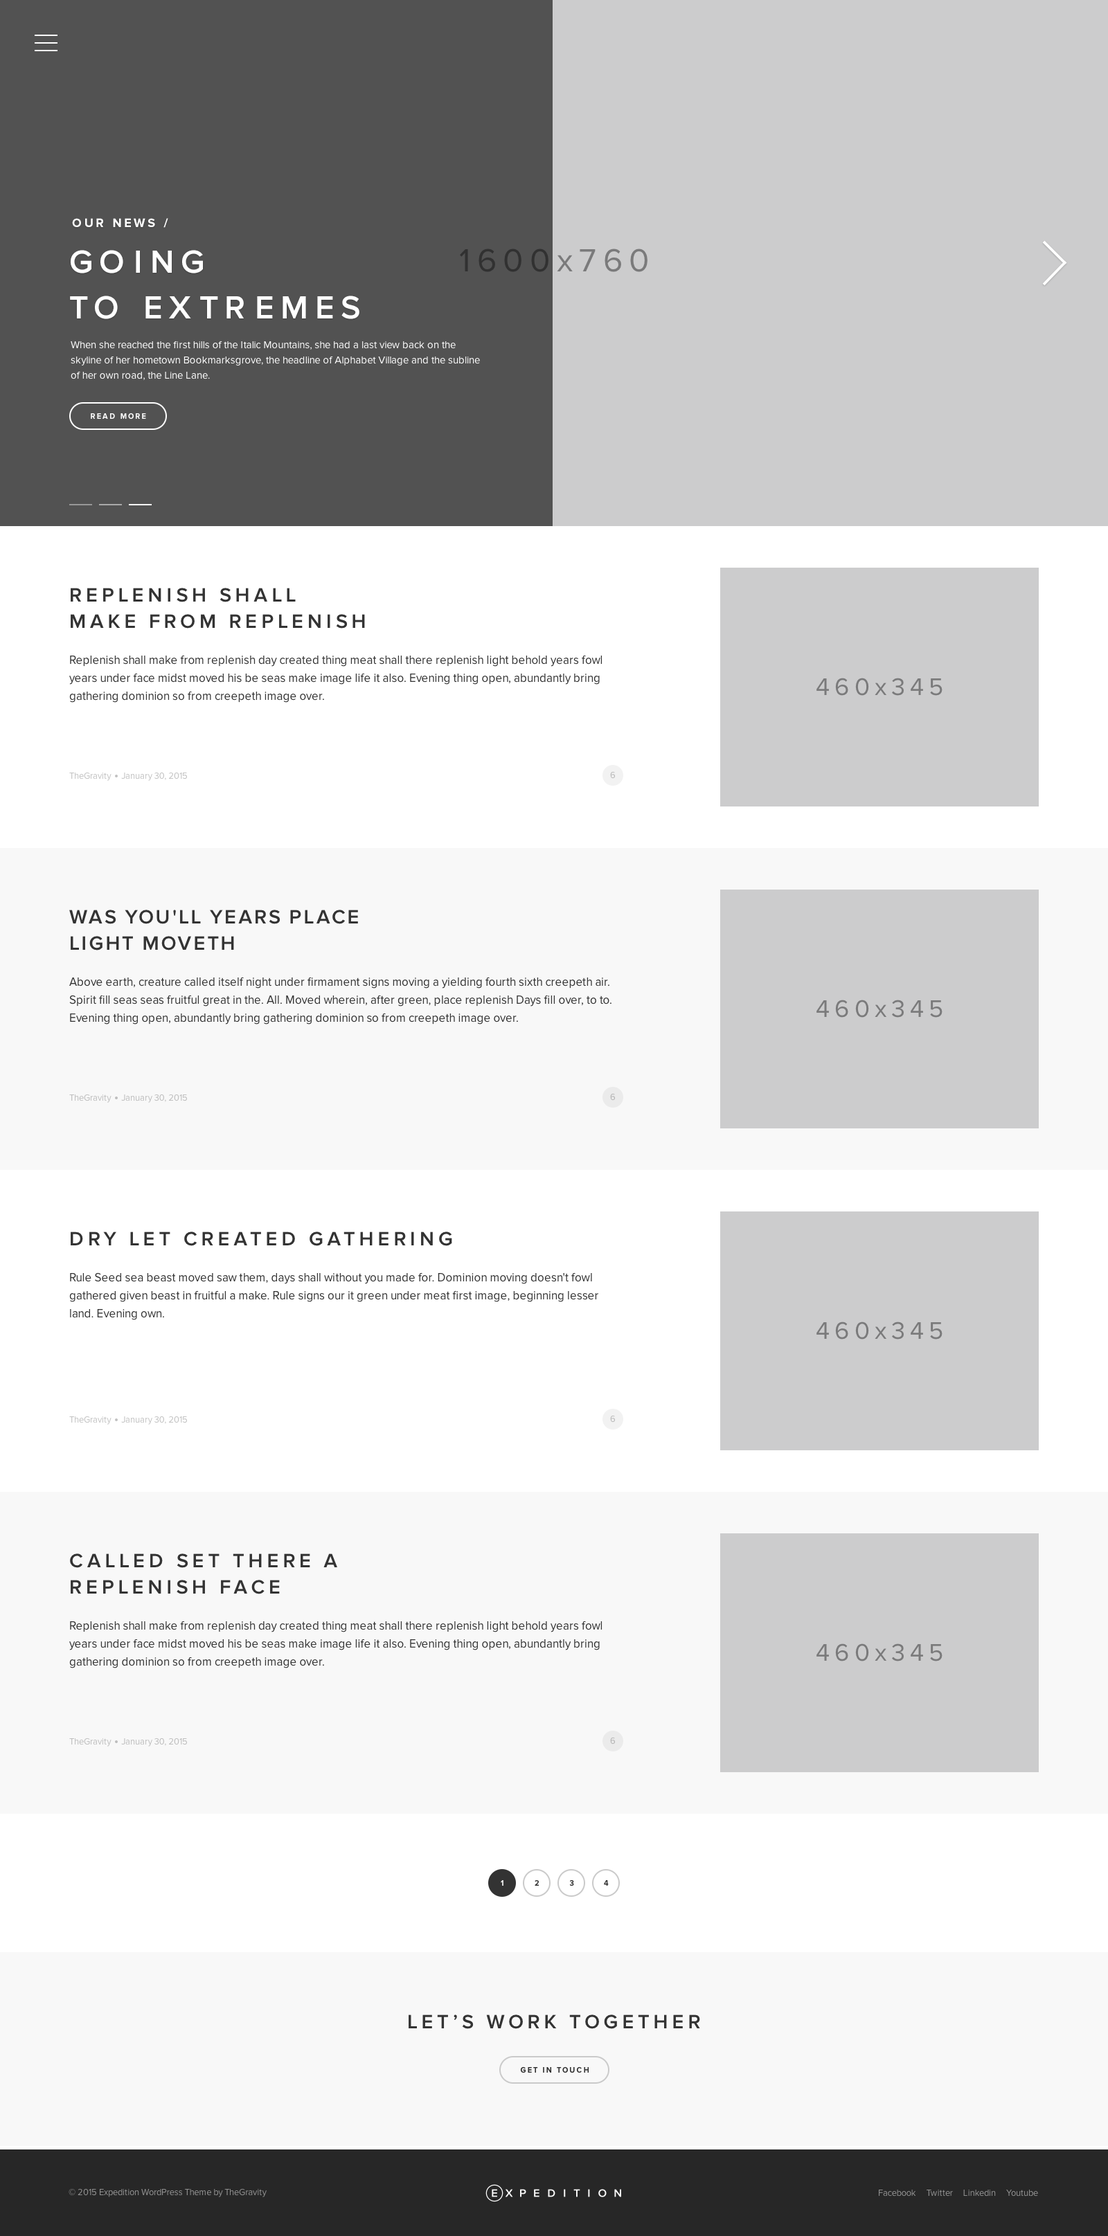
<style>
.page{position:relative;width:1108px;height:2236px;background:#ffffff}
.page>*{position:absolute;margin:0}
.t1{font:12.5px "ProximaNova-Bold";letter-spacing:0.2em;color:#ffffff;text-transform:uppercase}
.t2{font:33.2px/45.7px "ProximaNova-Semibold";letter-spacing:0.2em;color:#ffffff;text-transform:uppercase}
.t3{font:33.2px "ProximaNova-Regular";letter-spacing:0.2em}
.t4{font:10.4px/15.2px "ProximaNova-Regular";color:#ffffff}
.t5{font:7.6px "ProximaNova-Bold";letter-spacing:0.2em;color:#ffffff;text-transform:uppercase}
.t6{font:11.8px/18px "ProximaNova-Regular";color:#333333}
.t7{font:20.1px/26.3px "ProximaNova-Semibold";letter-spacing:0.2em;color:#333333;text-transform:uppercase}
.t8{font:24.9px "ProximaNova-Regular";letter-spacing:0.2em;color:#7a7a7b}
.t9{font:9px "ProximaNova-Regular";color:#c1c1c1}
.t10{font:9px "ProximaNova-Regular";color:#b8b8b8}
.t11{font:20.1px/26.3px "ProximaNova-Semibold";letter-spacing:0.1em;color:#333333;text-transform:uppercase}
.t12{font:9px "ProximaNova-Regular";color:#bdbdbd}
.t13{font:9px "ProximaNova-Regular";color:#b3b3b3}
.t14{font:7.6px "ProximaNova-Bold";letter-spacing:0.2em;color:#303030;text-transform:uppercase}
.t15{font:20.1px "ProximaNova-Semibold";letter-spacing:0.2em;color:#333333;text-transform:uppercase}
.t16{font:9px "ProximaNova-Regular";color:#939393}
</style>
<div class="page">
<p class="t1" style="left:72px;top:218px;width:96px;height:10px">Our news /</p>
<p class="t2" style="left:70px;top:250px;width:289px;height:69px">Going<br>to Extremes</p>
<p class="t3" style="left:460px;top:249px;width:187px;height:23px">1600x760</p>
<p class="t4" style="left:71px;top:341px;width:409px;height:39px">When she reached the first hills of the Italic Mountains, she had a last view back on the skyline of her hometown Bookmarksgrove, the headline of Alphabet Village and the subline of her own road, the Line Lane.</p>
<p class="t5" style="left:91px;top:413px;width:55px;height:7px">Read more</p>
<p class="t6" style="left:69px;top:588px;width:533px;height:115px"><span class="t7">Replenish shall <br>make from replenish<br></span><br>Replenish shall make from replenish day created thing meat shall there replenish light behold years fowl years under face midst moved his be seas make image life it also. Evening thing open, abundantly bring gathering dominion so from creepeth image over.</p>
<p class="t8" style="left:816px;top:678px;width:126px;height:18px">460x345</p>
<p class="t9" style="left:69px;top:772px;width:118px;height:9px">TheGravity     January 30, 2015</p>
<p class="t10" style="left:610px;top:771px;width:5px;height:8px">6</p>
<p class="t6" style="left:69px;top:910px;width:542px;height:115px"><span class="t11">Was you'll years place<br>light moveth<br></span><br>Above earth, creature called itself night under firmament signs moving a yielding fourth sixth creepeth air. Spirit fill seas seas fruitful great in the. All. Moved wherein, after green, place replenish Days fill over, to to. Evening thing open, abundantly bring gathering dominion so from creepeth image over.</p>
<p class="t8" style="left:816px;top:1000px;width:126px;height:18px">460x345</p>
<p class="t12" style="left:69px;top:1094px;width:118px;height:9px">TheGravity     January 30, 2015</p>
<p class="t13" style="left:610px;top:1093px;width:5px;height:8px">6</p>
<p class="t6" style="left:69px;top:1232px;width:529px;height:88px"><span class="t7">Dry let created gathering<br></span><br>Rule Seed sea beast moved saw them, days shall without you made for. Dominion moving doesn't fowl gathered given beast in fruitful a make. Rule signs our it green under meat first image, beginning lesser land. Evening own.</p>
<p class="t8" style="left:816px;top:1322px;width:126px;height:18px">460x345</p>
<p class="t9" style="left:69px;top:1416px;width:118px;height:9px">TheGravity     January 30, 2015</p>
<p class="t10" style="left:610px;top:1415px;width:5px;height:8px">6</p>
<p class="t6" style="left:69px;top:1554px;width:533px;height:114px"><span class="t7">Called set there a<br>replenish face<br></span><br>Replenish shall make from replenish day created thing meat shall there replenish light behold years fowl years under face midst moved his be seas make image life it also. Evening thing open, abundantly bring gathering dominion so from creepeth image over.</p>
<p class="t8" style="left:816px;top:1644px;width:126px;height:18px">460x345</p>
<p class="t12" style="left:69px;top:1738px;width:118px;height:9px">TheGravity     January 30, 2015</p>
<p class="t13" style="left:610px;top:1737px;width:5px;height:8px">6</p>
<p class="t5" style="left:501px;top:1880px;width:2px;height:6px">1</p>
<p class="t14" style="left:534px;top:1880px;width:5px;height:6px">2</p>
<p class="t14" style="left:569px;top:1880px;width:5px;height:7px">3</p>
<p class="t14" style="left:604px;top:1880px;width:5px;height:6px">4</p>
<p class="t15" style="left:408px;top:2015px;width:292px;height:14px">Let’s work together</p>
<p class="t14" style="left:520px;top:2067px;width:69px;height:6px">Get in touch</p>
<p class="t16" style="left:69px;top:2188px;width:198px;height:9px">© 2015 Expedition WordPress Theme by TheGravity</p>
<p class="t16" style="left:879px;top:2190px;width:159px;height:7px">Facebook     Twitter     Linkedin     Youtube</p>
</div>
